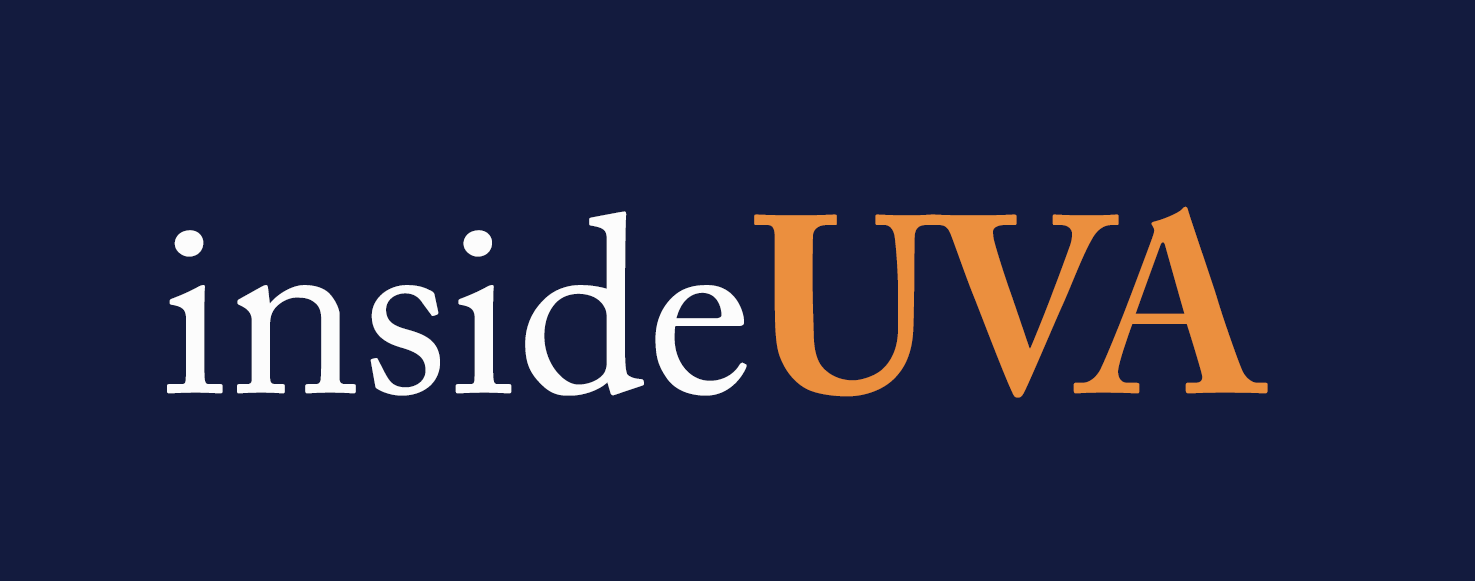
<style>
.page{position:relative;width:1475px;height:581px;background:#131b3e}
.page>*{position:absolute;margin:0}
.t1{font:250px "ACaslonPro-Regular";color:#fcfcfc}
.t2{font:250px "ACaslonPro-Bold";color:#eb8f3e}
</style>
<div class="page">
<p class="t1" style="left:167px;top:206px;width:1101px;height:192px">inside<span class="t2">UVA</span></p>
</div>
